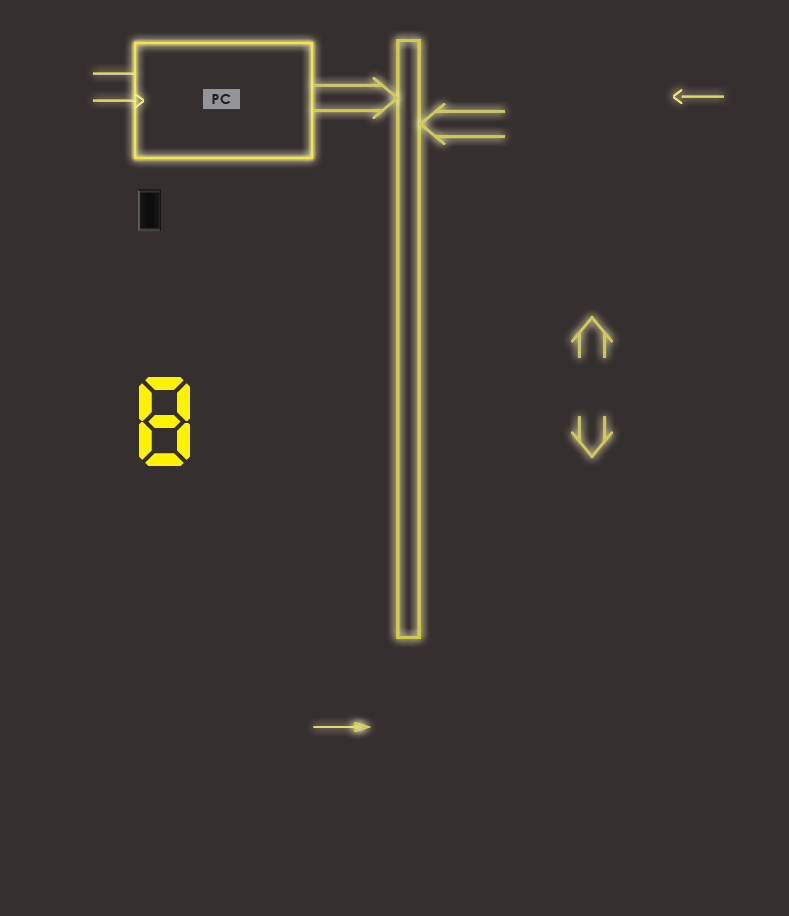
<style>
.page{position:relative;width:789px;height:916px;background:#362f2f}
.page>*{position:absolute;margin:0}
.t1{font:14px "CenturyGothic-Bold";letter-spacing:0.05em;color:#231f20}
</style>
<div class="page">
<p class="t1" style="left:212px;top:94px;width:19px;height:10px">PC</p>
</div>
